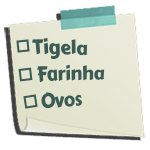
<style>
.page{position:relative;width:150px;height:150px;background:#ffffff}
.page>*{position:absolute;margin:0}
.t1{font:18.2px/24.2px "CarterOne";letter-spacing:-0.02em;color:#3b5b55}
</style>
<div class="page">
<p class="t1" style="left:32px;top:37px;width:73px;height:72px;rotate:-4deg">Tigela<br>Farinha<br>Ovos</p>
</div>
